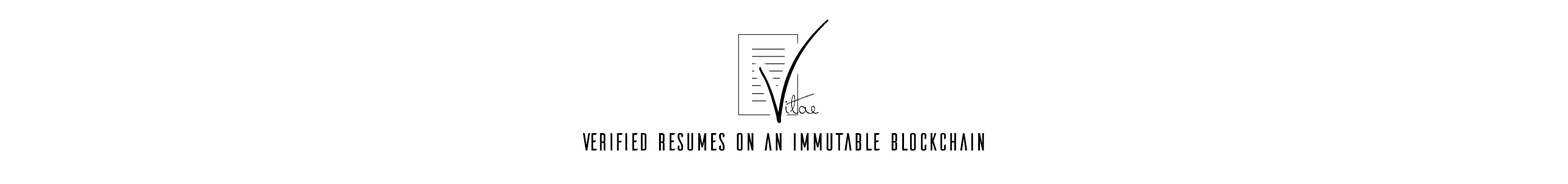
<style>
.page{position:relative;width:1568px;height:184px;background:#ffffff}
.page>*{position:absolute;margin:0}
.t1{font:104.9px "SweetlyBroken";color:#000000;font-weight:bold}
.t2{font:30.3px "Dreamer";color:#000000;font-weight:bold}
.t3{font:25.5px "Ailerons";color:#000000}
</style>
<div class="page">
<p class="t1" style="left:759px;top:19px;width:70px;height:104px">V</p>
<p class="t2" style="left:785px;top:93px;width:34px;height:21px">itae</p>
<p class="t3" style="left:582px;top:132px;width:402px;height:19px">verified resumes on an immutable blockchain</p>
</div>
